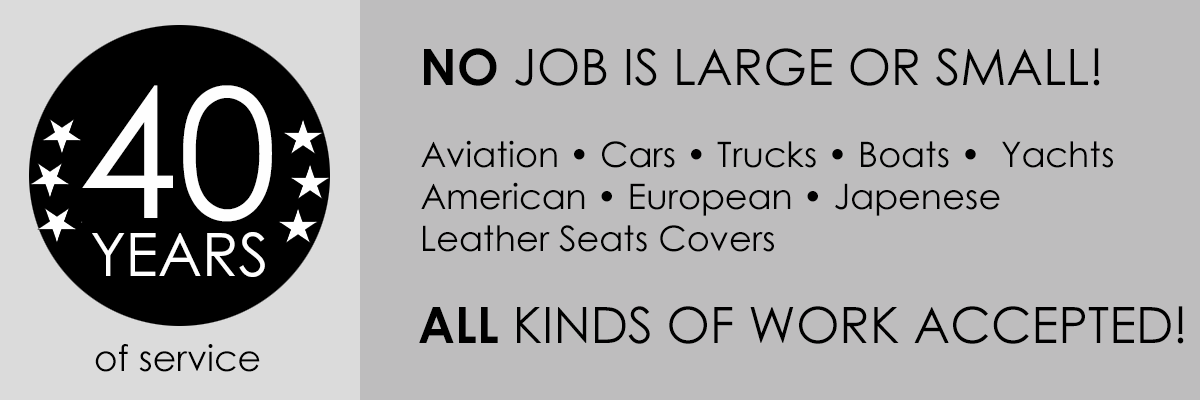
<style>
.page{position:relative;width:1200px;height:400px;background:#bebdbe}
.page>*{position:absolute;margin:0}
.t1{font:50px "CenturyGothic";color:#000000}
.t2{font:50px "CenturyGothic-Bold";color:#000000}
.t3{font:180px "CenturyGothic";color:#fefefe}
.t4{font:35px "CenturyGothic";color:#000000}
.t5{font:60px "CenturyGothic";color:#fefefe}
.t6{font:36px "CenturyGothic";color:#000000}
</style>
<div class="page">
<p class="t1" style="left:424px;top:48px;width:676px;height:38px"><span class="t2">NO</span> JOB IS LARGE OR SMALL!</p>
<p class="t3" style="left:82px;top:85px;width:190px;height:137px">40</p>
<p class="t4" style="left:421px;top:140px;width:692px;height:112px">Aviation • Cars • Trucks • Boats •  Yachts <br>American • European • Japenese<br>Leather Seats Covers</p>
<p class="t5" style="left:92px;top:232px;width:173px;height:45px">YEARS</p>
<p class="t1" style="left:419px;top:306px;width:765px;height:38px"><span class="t2">ALL</span> KINDS OF WORK ACCEPTED!</p>
<p class="t6" style="left:95px;top:344px;width:165px;height:28px">of service</p>
</div>
